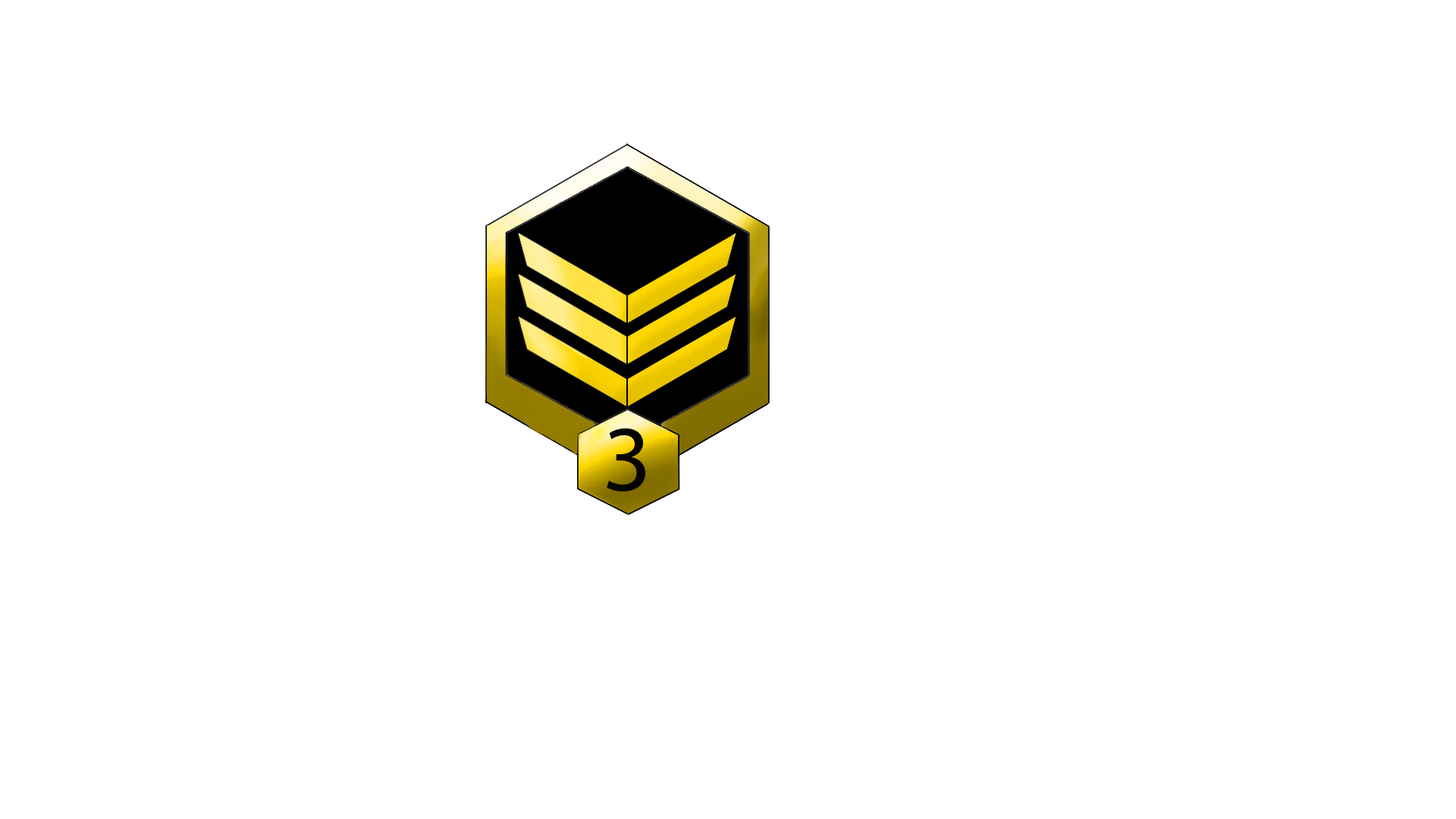
<style>
.page{position:relative;width:1456px;height:819px;background:#ffffff}
.page>*{position:absolute;margin:0}
.t1{font:94.8px "MyriadPro-Regular";color:#050400}
</style>
<div class="page">
<p class="t1" style="left:607px;top:428px;width:38px;height:64px">3</p>
</div>
